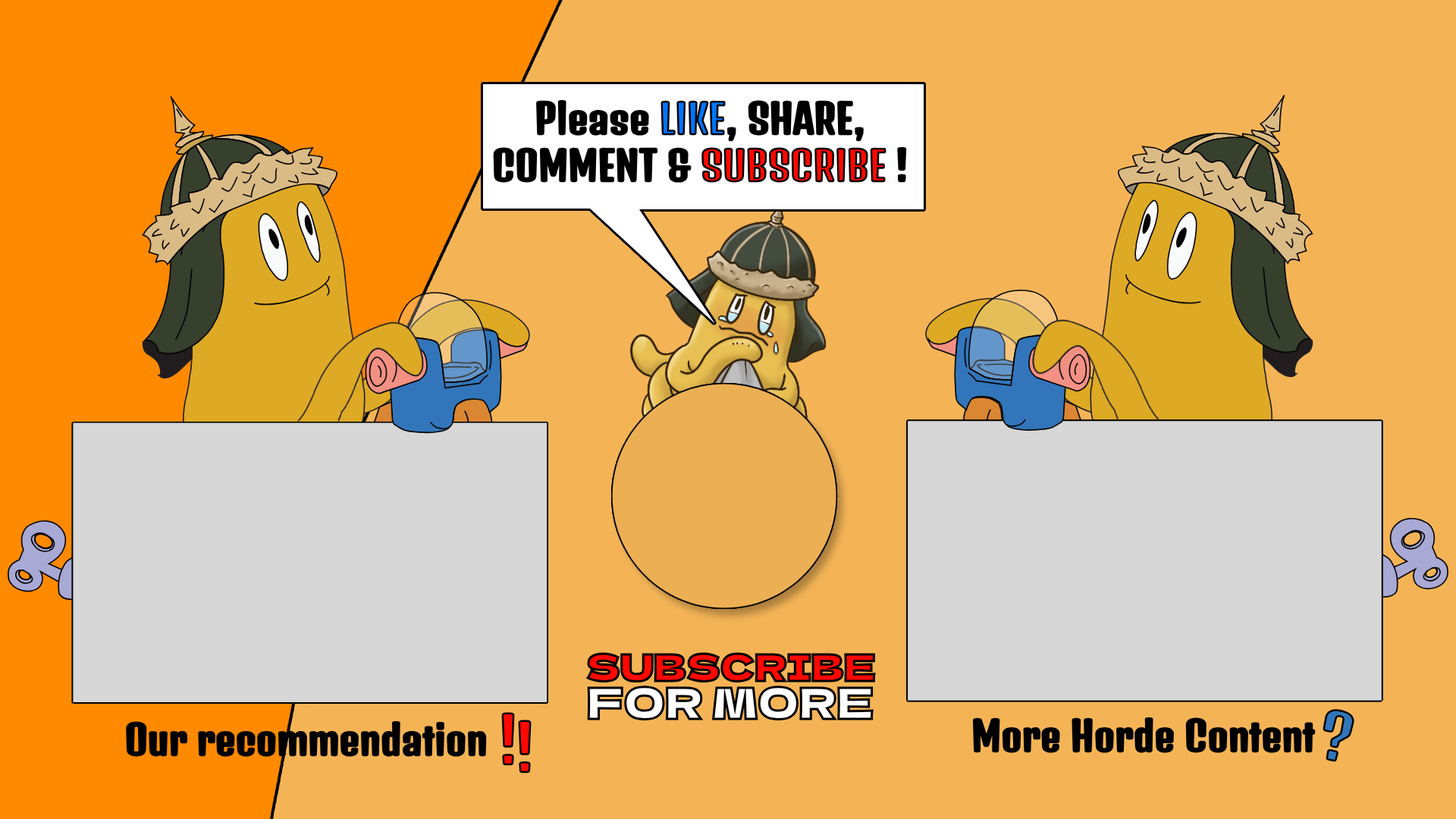
<style>
.page{position:relative;width:1456px;height:819px;background:#f4b456}
.page>*{position:absolute;margin:0}
.t1{font:39.4px "DenkOne-Regular";color:#000000}
.t2{font:39.4px "DenkOne-Regular";color:#0075ff}
.t3{font:39.4px "DenkOne-Regular";color:#ff0800}
.t4{font:36.6px "DelaGothicOne-Regular"}
.t5{font:60.7px "DenkOne-Regular"}
</style>
<div class="page">
<p class="t1" style="left:492px;top:99px;width:415px;height:85px;text-align:center">Please <span class="t2">LIKE</span>, SHARE, COMMENT &amp; <span class="t3">SUBSCRIBE </span>!</p>
<p class="t4" style="left:586px;top:652px;width:290px;height:30px">SUBSCRIBE</p>
<p class="t5" style="left:500px;top:711px;width:16px;height:55px">!</p>
<p class="t5" style="left:1323px;top:709px;width:31px;height:53px;rotate:12deg">?</p>
<p class="t1" style="left:125px;top:720px;width:363px;height:38px">Our recommendation</p>
<p class="t5" style="left:517px;top:719px;width:15px;height:54px">!</p>
<p class="t1" style="left:972px;top:717px;width:344px;height:37px">More Horde Content</p>
</div>
